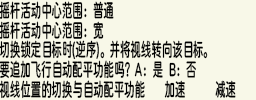
<style>
.page{position:relative;width:256px;height:100px;background:#f8f8e8}
.page>*{position:absolute;margin:0}
.t1{font:19px "ChillRoundFBold";color:#000000}
</style>
<div class="page">
<p class="t1" style="left:0px;top:1px;width:114px;height:19px">摇杆活动中心范围：普通</p>
<p class="t1" style="left:0px;top:21px;width:104px;height:19px">摇杆活动中心范围：宽</p>
<p class="t1" style="left:0px;top:40px;width:208px;height:20px">切换锁定目标时(逆序)。并将视线转向该目标。</p>
<p class="t1" style="left:0px;top:60px;width:196px;height:19px">要追加飞行自动配平功能吗？A：是 B：否</p>
<p class="t1" style="left:0px;top:80px;width:145px;height:19px">视线位置的切换与自动配平功能</p>
<p class="t1" style="left:164px;top:80px;width:21px;height:18px">加速</p>
<p class="t1" style="left:215px;top:80px;width:21px;height:18px">减速</p>
</div>
